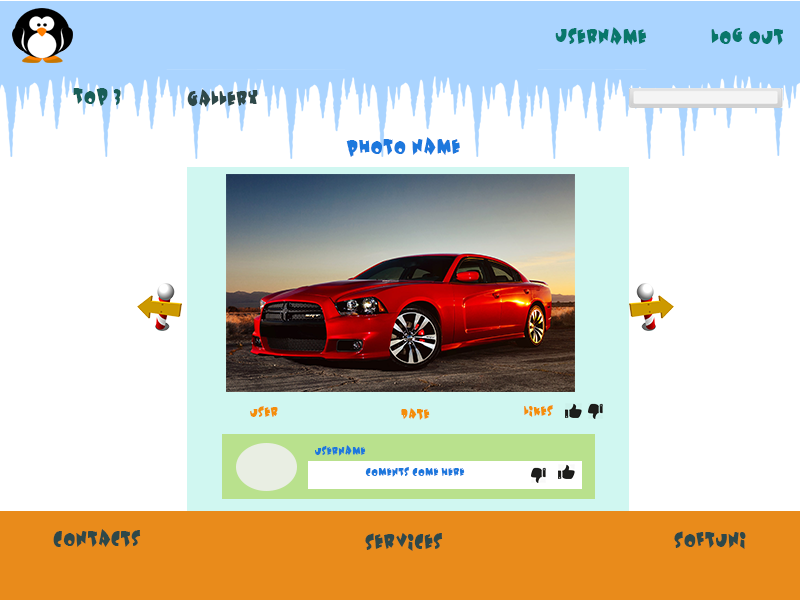
<style>
.page{position:relative;width:800px;height:600px;background:#ffffff}
.page>*{position:absolute;margin:0}
.t1{font:18px "Underattack";color:#08776b}
.t2{font:18px "Underattack";color:#185e57}
.t3{font:18px "Underattack";color:#2e4849}
.t4{font:18px "Underattack";color:#1d78dd}
.t5{font:12px "Underattack";color:#f48e09}
.t6{font:10px "Underattack";color:#1d78dd}
</style>
<div class="page">
<p class="t1" style="left:555px;top:27px;width:92px;height:18px">UserName</p>
<p class="t1" style="left:711px;top:28px;width:72px;height:17px">log out</p>
<p class="t2" style="left:73px;top:88px;width:48px;height:18px">Top 3</p>
<p class="t3" style="left:187px;top:89px;width:71px;height:18px">Gallery</p>
<p class="t4" style="left:346px;top:137px;width:114px;height:20px">Photo name</p>
<p class="t5" style="left:250px;top:406px;width:28px;height:11px">user</p>
<p class="t5" style="left:401px;top:408px;width:29px;height:12px">date</p>
<p class="t5" style="left:524px;top:405px;width:29px;height:12px">likes</p>
<p class="t6" style="left:315px;top:445px;width:51px;height:11px">username</p>
<p class="t6" style="left:365px;top:467px;width:100px;height:10px">Coments come here</p>
<p class="t3" style="left:53px;top:529px;width:88px;height:18px">Contacts</p>
<p class="t3" style="left:365px;top:533px;width:78px;height:18px">Services</p>
<p class="t3" style="left:674px;top:531px;width:72px;height:18px">Softuni</p>
</div>
